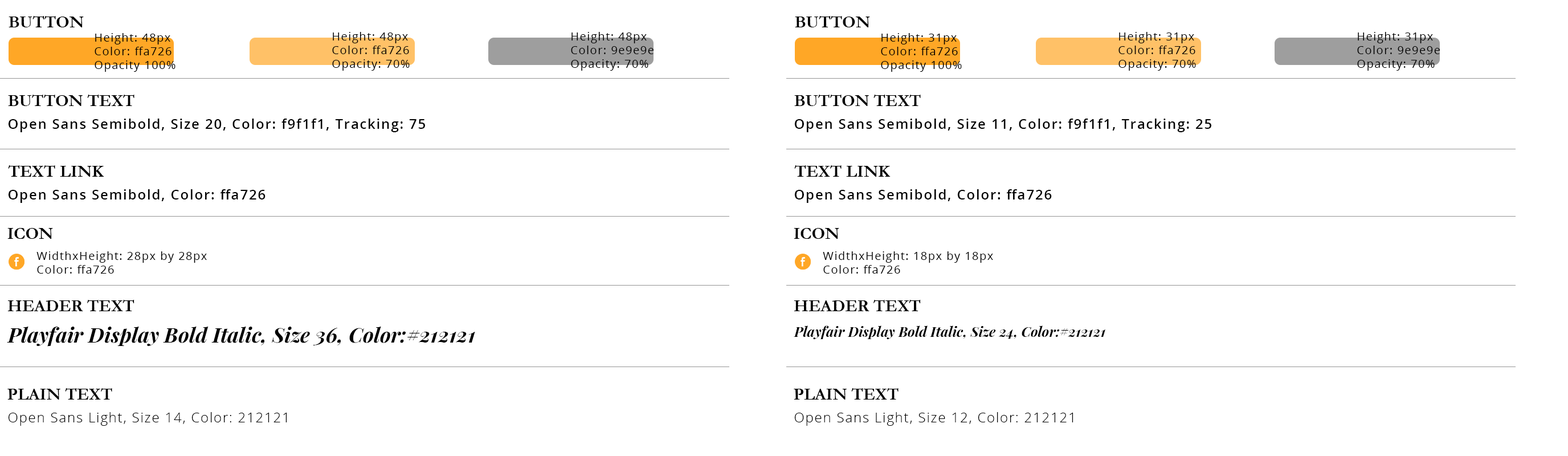
<style>
.page{position:relative;width:1568px;height:456px;background:#ffffff}
.page>*{position:absolute;margin:0}
.t1{font:17.1px "Garamond-Bold";color:#000000;text-transform:uppercase}
.t2{font:11.4px/13.7px "OpenSans";letter-spacing:0.075em;color:#000000}
.t3{font:13.7px "OpenSans-Semibold";letter-spacing:0.075em;color:#000000}
.t4{font:20.5px "PlayfairDisplay-BoldItalic";color:#000000}
.t5{font:13.7px "PlayfairDisplay-BoldItalic";color:#000000}
.t6{font:13.7px "OpenSans-Light";letter-spacing:0.075em;color:#000000}
</style>
<div class="page">
<p class="t1" style="left:9px;top:16px;width:75px;height:11px">Button</p>
<p class="t1" style="left:795px;top:16px;width:75px;height:11px">Button</p>
<p class="t2" style="left:95px;top:33px;width:80px;height:39px">Height: 48px<br>Color: ffa726<br>Opacity 100%</p>
<p class="t2" style="left:332px;top:32px;width:78px;height:39px">Height: 48px<br>Color: ffa726<br>Opacity: 70%</p>
<p class="t2" style="left:571px;top:32px;width:83px;height:39px">Height: 48px<br>Color: 9e9e9e<br>Opacity: 70%</p>
<p class="t2" style="left:881px;top:33px;width:81px;height:39px">Height: 31px<br>Color: ffa726<br>Opacity 100%</p>
<p class="t2" style="left:1118px;top:32px;width:78px;height:39px">Height: 31px<br>Color: ffa726<br>Opacity: 70%</p>
<p class="t2" style="left:1357px;top:32px;width:83px;height:39px">Height: 31px<br>Color: 9e9e9e<br>Opacity: 70%</p>
<p class="t1" style="left:8px;top:95px;width:126px;height:11px">Button text</p>
<p class="t1" style="left:794px;top:95px;width:127px;height:11px">Button text</p>
<p class="t3" style="left:8px;top:119px;width:417px;height:13px">Open Sans Semibold, Size 20, Color: f9f1f1, Tracking: 75</p>
<p class="t3" style="left:794px;top:119px;width:417px;height:13px">Open Sans Semibold, Size 11, Color: f9f1f1, Tracking: 25</p>
<p class="t1" style="left:8px;top:165px;width:96px;height:12px">text link</p>
<p class="t1" style="left:794px;top:165px;width:97px;height:12px">text link</p>
<p class="t3" style="left:8px;top:189px;width:258px;height:14px">Open Sans Semibold, Color: ffa726</p>
<p class="t3" style="left:794px;top:189px;width:258px;height:14px">Open Sans Semibold, Color: ffa726</p>
<p class="t1" style="left:7px;top:228px;width:46px;height:11px">Icon</p>
<p class="t1" style="left:794px;top:228px;width:45px;height:11px">Icon</p>
<p class="t2" style="left:36px;top:251px;width:171px;height:22px">WidthxHeight: 28px by 28px<br>Color: ffa726</p>
<p class="t2" style="left:823px;top:251px;width:170px;height:22px">WidthxHeight: 18px by 18px<br>Color: ffa726</p>
<p class="t1" style="left:7px;top:300px;width:127px;height:11px">Header Text</p>
<p class="t1" style="left:794px;top:300px;width:127px;height:11px">Header Text</p>
<p class="t4" style="left:7px;top:326px;width:468px;height:20px">Playfair Display Bold Italic, Size 36, Color:#212121</p>
<p class="t5" style="left:794px;top:325px;width:311px;height:15px">Playfair Display Bold Italic, Size 24, Color:#212121</p>
<p class="t1" style="left:7px;top:388px;width:105px;height:11px">plain text</p>
<p class="t1" style="left:794px;top:388px;width:105px;height:11px">plain text</p>
<p class="t6" style="left:8px;top:412px;width:279px;height:14px">Open Sans Light, Size 14, Color: 212121</p>
<p class="t6" style="left:794px;top:412px;width:279px;height:14px">Open Sans Light, Size 12, Color: 212121</p>
</div>
